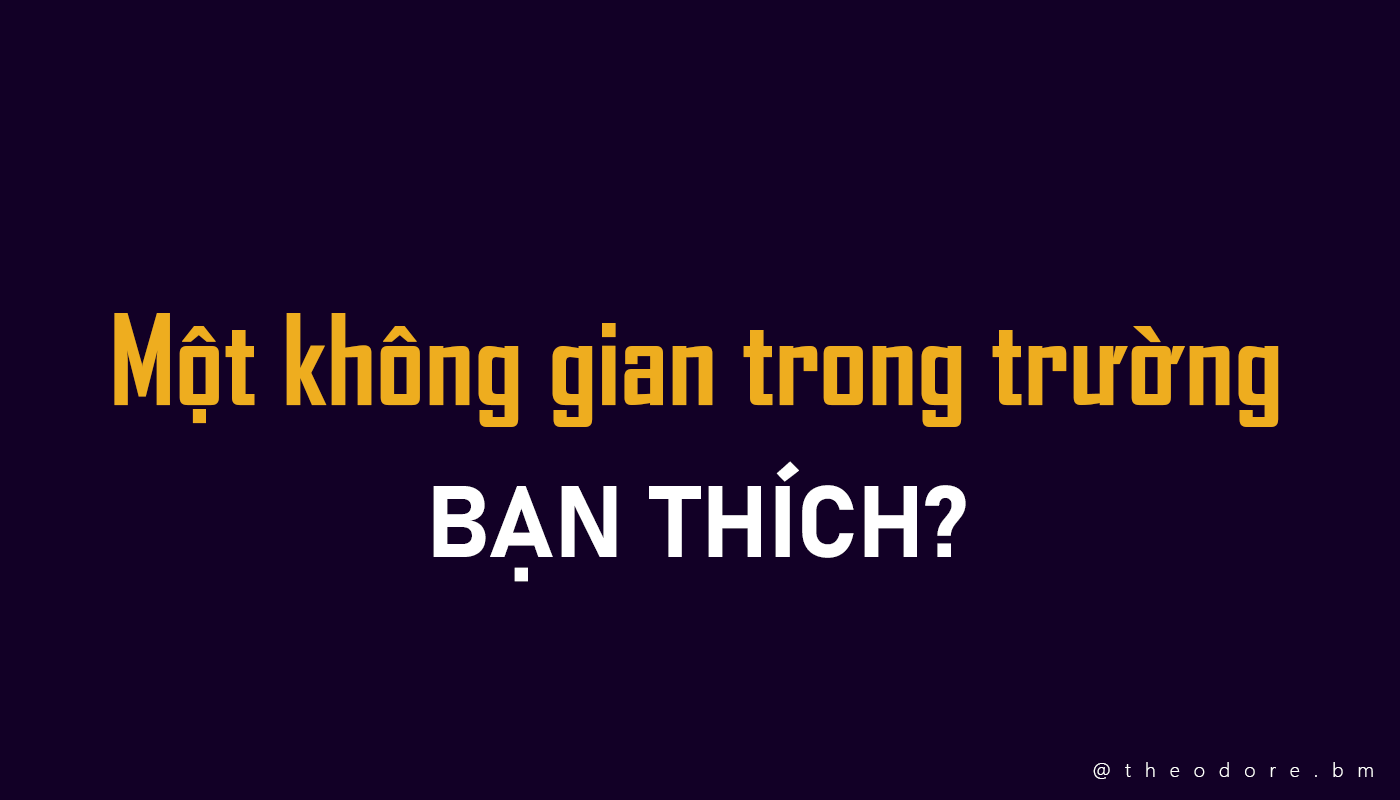
<style>
.page{position:relative;width:1400px;height:800px;background:#120026}
.page>*{position:absolute;margin:0}
.t1{font:120px "SVN-AgencyFBbold";color:#eead1f}
.t2{font:100px "Bahnschrift-Bold";color:#ffffff}
.t3{font:20px "SegoeUI-Light";letter-spacing:0.7em;color:#ffffff}
</style>
<div class="page">
<p class="t1" style="left:114px;top:313px;width:1165px;height:114px">Một không gian trong trường</p>
<p class="t2" style="left:433px;top:461px;width:533px;height:121px">BẠN THÍCH?</p>
<p class="t3" style="left:1093px;top:762px;width:280px;height:17px">@theodore.bm</p>
</div>
